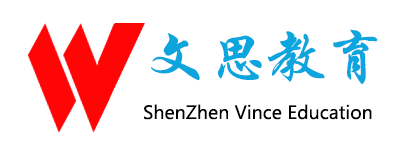
<style>
.page{position:relative;width:400px;height:150px;background:#ffffff}
.page>*{position:absolute;margin:0}
.t1{font:60px "STXingkai";color:#0da5de}
.t2{font:18px "MicrosoftYaHei";color:#000101}
</style>
<div class="page">
<p class="t1" style="left:151px;top:29px;width:227px;height:55px">文思教育</p>
<p class="t2" style="left:144px;top:104px;width:228px;height:16px">ShenZhen Vince Education</p>
</div>
